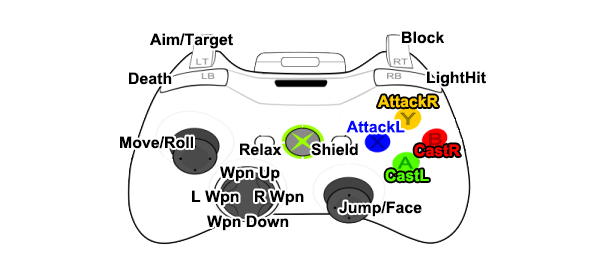
<style>
.page{position:relative;width:600px;height:278px;background:#ffffff}
.page>*{position:absolute;margin:0}
.t1{font:15.9px "Arial-BoldMT";color:#000000}
.t2{font:15.9px "Arial-BoldMT";color:#ffcc00}
.t3{font:15.9px "Arial-BoldMT";color:#0006ff}
.t4{font:15.9px "Arial-BoldMT";color:#ff0000}
.t5{font:15.9px "Arial-BoldMT";color:#54ff00}
</style>
<div class="page">
<p class="t1" style="left:150px;top:33px;width:83px;height:16px">Aim/Target</p>
<p class="t1" style="left:402px;top:31px;width:43px;height:13px">Block</p>
<p class="t1" style="left:129px;top:72px;width:43px;height:13px">Death</p>
<p class="t1" style="left:427px;top:71px;width:59px;height:16px">LightHit</p>
<p class="t2" style="left:378px;top:95px;width:60px;height:13px">AttackR</p>
<p class="t3" style="left:346px;top:120px;width:59px;height:13px">AttackL</p>
<p class="t1" style="left:120px;top:136px;width:73px;height:13px">Move/Roll</p>
<p class="t1" style="left:240px;top:143px;width:42px;height:13px">Relax</p>
<p class="t1" style="left:311px;top:143px;width:47px;height:13px">Shield</p>
<p class="t4" style="left:414px;top:144px;width:46px;height:13px">CastR</p>
<p class="t1" style="left:220px;top:166px;width:60px;height:16px">Wpn Up</p>
<p class="t5" style="left:385px;top:169px;width:44px;height:13px">CastL</p>
<p class="t1" style="left:192px;top:190px;width:47px;height:16px">L Wpn</p>
<p class="t1" style="left:255px;top:190px;width:49px;height:16px">R Wpn</p>
<p class="t1" style="left:339px;top:201px;width:83px;height:16px">Jump/Face</p>
<p class="t1" style="left:207px;top:215px;width:82px;height:16px">Wpn Down</p>
</div>
